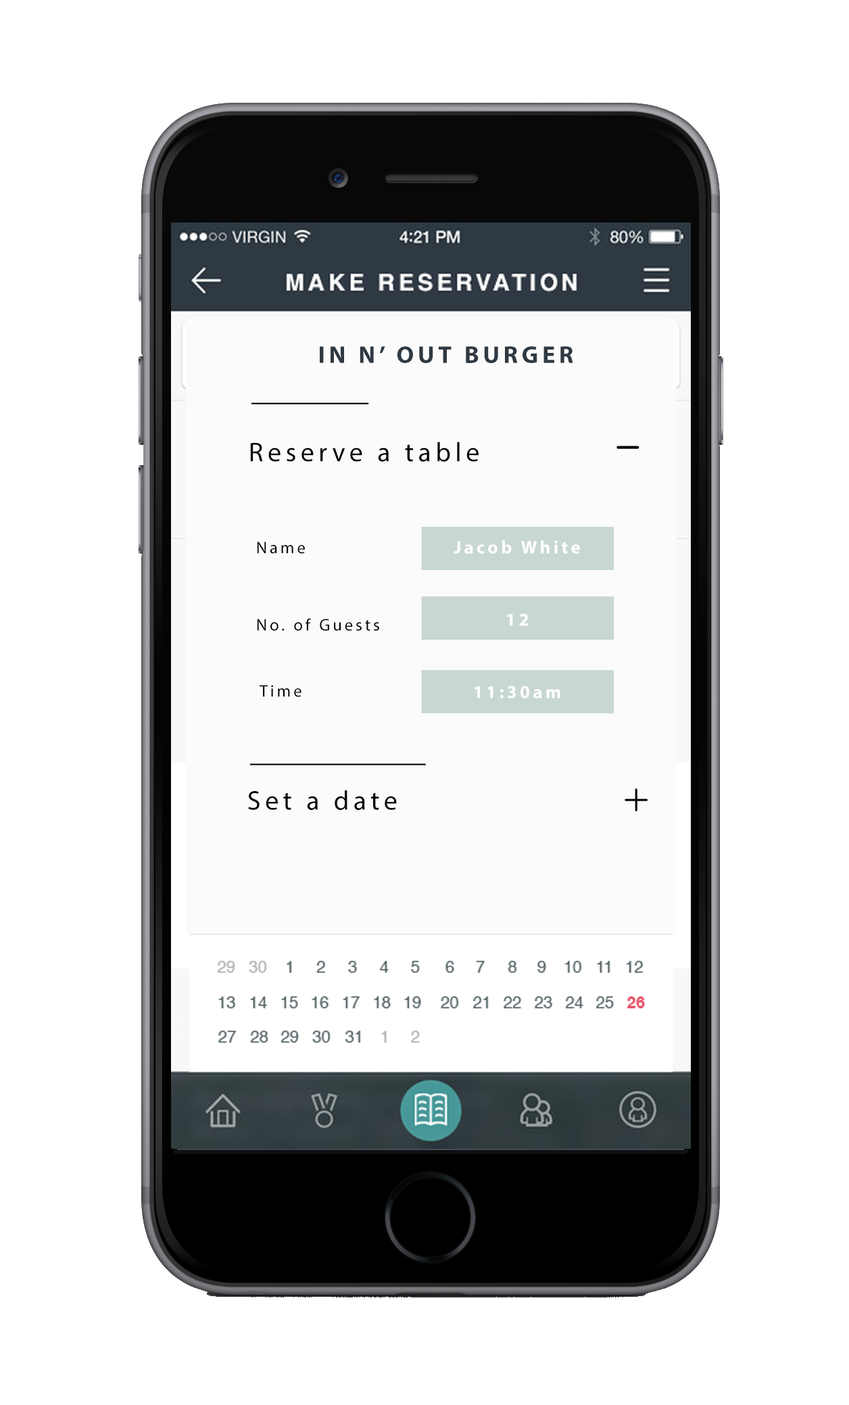
<style>
.page{position:relative;width:849px;height:1405px;background:#ffffff}
.page>*{position:absolute;margin:0}
.t1{font:24.3px "MyriadPro-Bold";letter-spacing:0.16em;color:#2f3942}
.t2{font:27px "MyriadPro-Regular";letter-spacing:0.16em;color:#000000}
.t3{font:16.7px "MyriadPro-Regular";letter-spacing:0.16em;color:#000000}
.t4{font:18.3px "MyriadPro-Bold";letter-spacing:0.16em;color:#ffffff}
</style>
<div class="page">
<p class="t1" style="left:320px;top:346px;width:253px;height:17px">IN N’ OUT BURGER</p>
<p class="t2" style="left:250px;top:441px;width:229px;height:21px">Reserve a table</p>
<p class="t3" style="left:257px;top:541px;width:48px;height:13px">Name</p>
<p class="t4" style="left:454px;top:540px;width:126px;height:14px">Jacob White</p>
<p class="t3" style="left:257px;top:618px;width:122px;height:13px">No. of Guests</p>
<p class="t4" style="left:507px;top:613px;width:21px;height:13px">12</p>
<p class="t3" style="left:260px;top:685px;width:41px;height:12px">Time</p>
<p class="t4" style="left:475px;top:685px;width:85px;height:13px">11:30am</p>
<p class="t2" style="left:248px;top:790px;width:149px;height:20px">Set a date</p>
</div>
